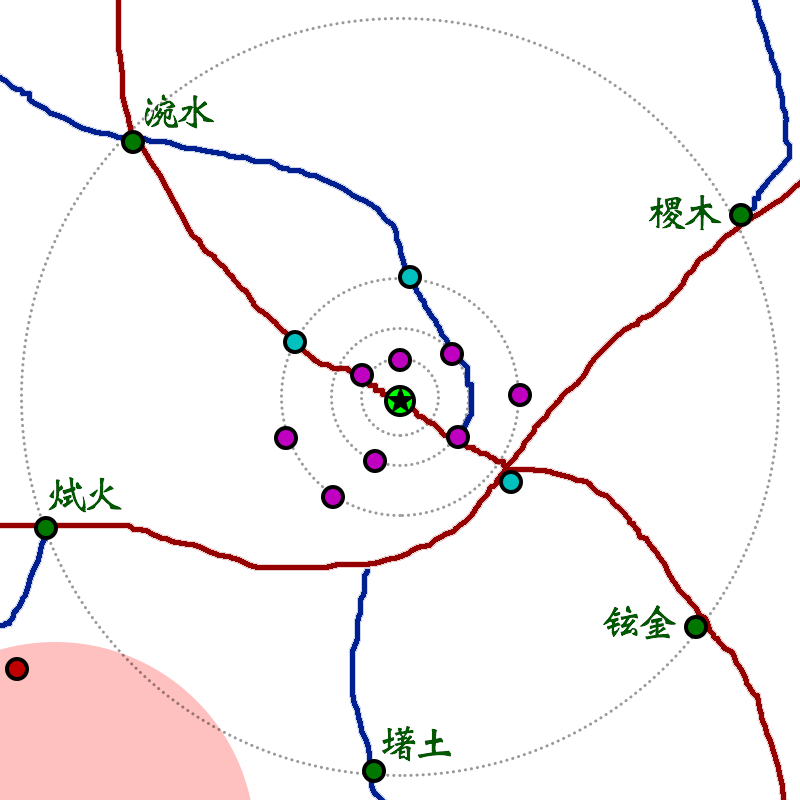
<style>
.page{position:relative;width:800px;height:800px;background:#ffffff}
.page>*{position:absolute;margin:0}
.t1{font:40px "Weibei-SC-Bold";letter-spacing:-0.1em;color:#005800}
</style>
<div class="page">
<p class="t1" style="left:144px;top:94px;width:71px;height:35px">涴水</p>
<p class="t1" style="left:649px;top:195px;width:73px;height:36px">㮨木</p>
<p class="t1" style="left:48px;top:477px;width:74px;height:36px">烒火</p>
<p class="t1" style="left:603px;top:605px;width:73px;height:35px">铉金</p>
<p class="t1" style="left:382px;top:726px;width:69px;height:36px">墸土</p>
</div>
